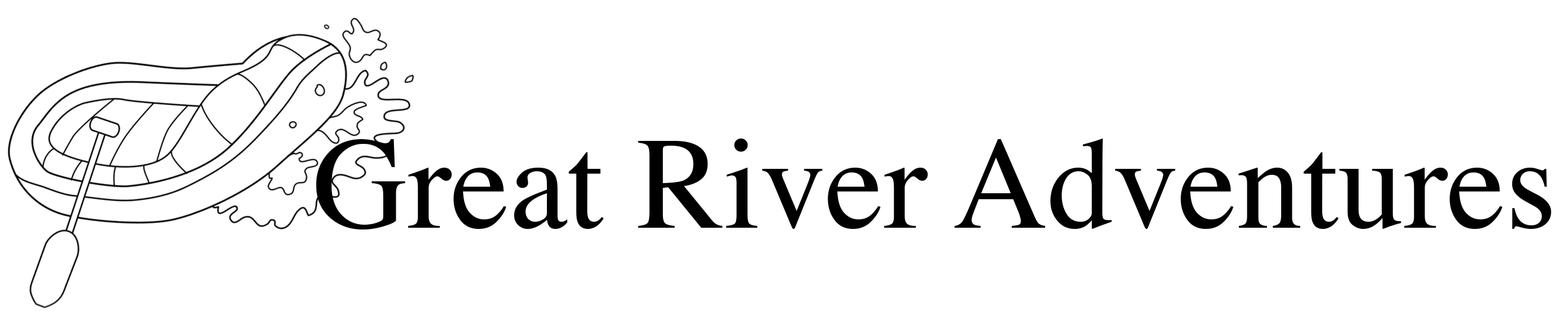
<style>
.page{position:relative;width:1568px;height:327px;background:#ffffff}
.page>*{position:absolute;margin:0}
.t1{font:130.9px "Times-Roman";color:#000000}
</style>
<div class="page">
<p class="t1" style="left:316px;top:139px;width:1235px;height:91px">Great River Adventures</p>
</div>
